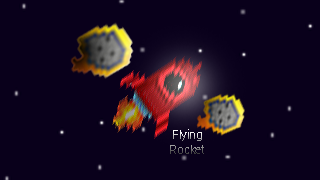
<style>
.page{position:relative;width:320px;height:180px;background:#09001b}
.page>*{position:absolute;margin:0}
.t1{font:12px "Roboto-Thin"}
</style>
<div class="page">
<p class="t1" style="left:170px;top:129px;width:34px;height:25px;text-align:center">Flying<br>Rocket</p>
</div>
